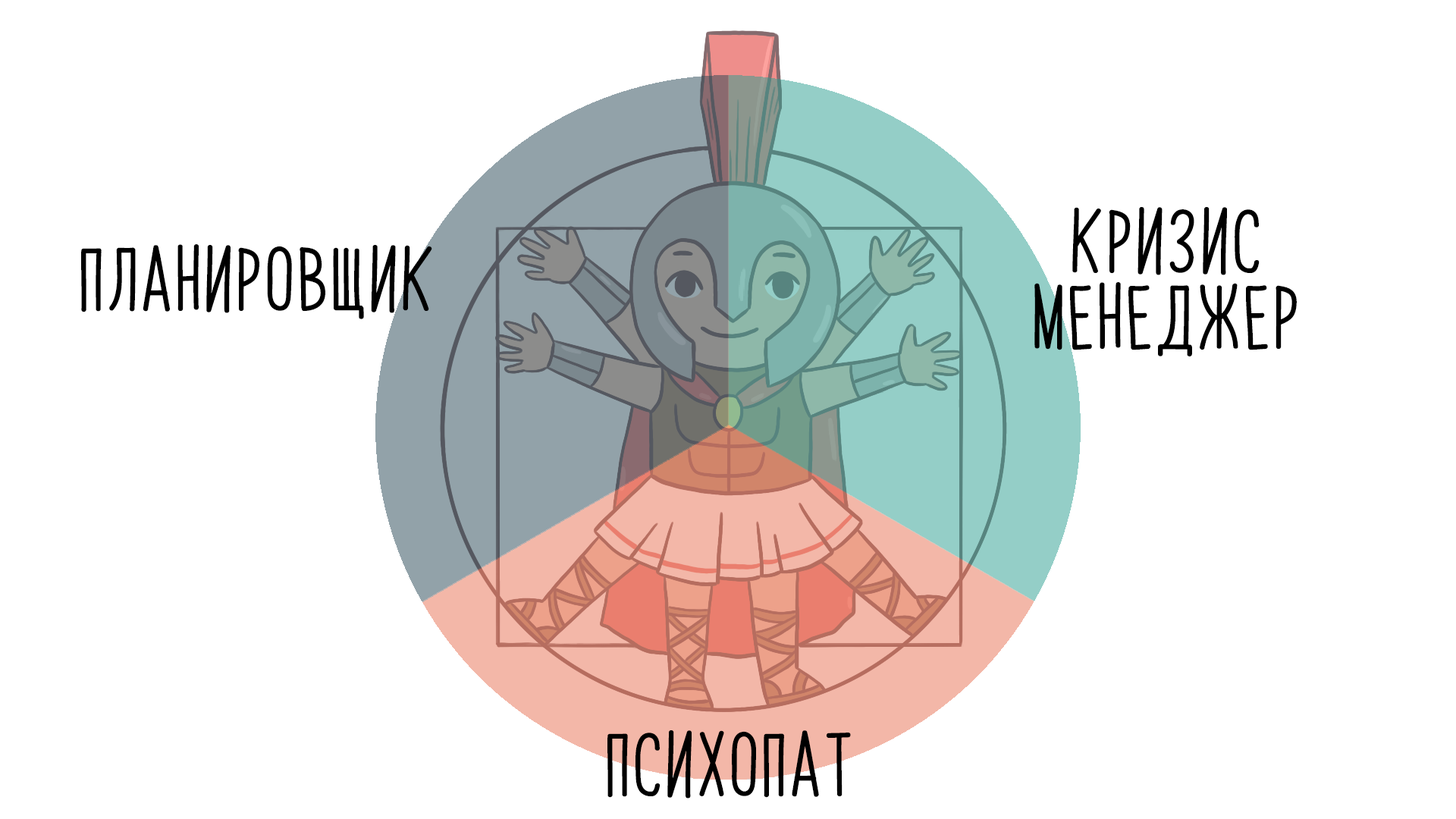
<style>
.page{position:relative;width:1456px;height:819px;background:#ffffff}
.page>*{position:absolute;margin:0}
.t1{font:54.6px/75.8px "PapayaSunrise";color:#000000;font-weight:bold}
.t2{font:54.6px "PapayaSunrise";color:#000000;font-weight:bold}
</style>
<div class="page">
<p class="t1" style="left:1034px;top:207px;width:263px;height:149px;text-align:center">кризис<br>менеджер</p>
<p class="t2" style="left:81px;top:244px;width:351px;height:75px">планировщик</p>
<p class="t2" style="left:607px;top:730px;width:244px;height:69px">пcихопат</p>
</div>
